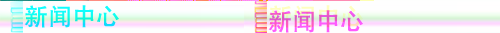
<style>
.page{position:relative;width:500px;height:33px;background:#fefefe}
.page>*{position:absolute;margin:0}
.t1{font:24px "AdobeHeitiStd-Regular"}
</style>
<div class="page">
<p class="t1" style="left:24px;top:5px;width:95px;height:23px">新闻中心</p>
</div>
